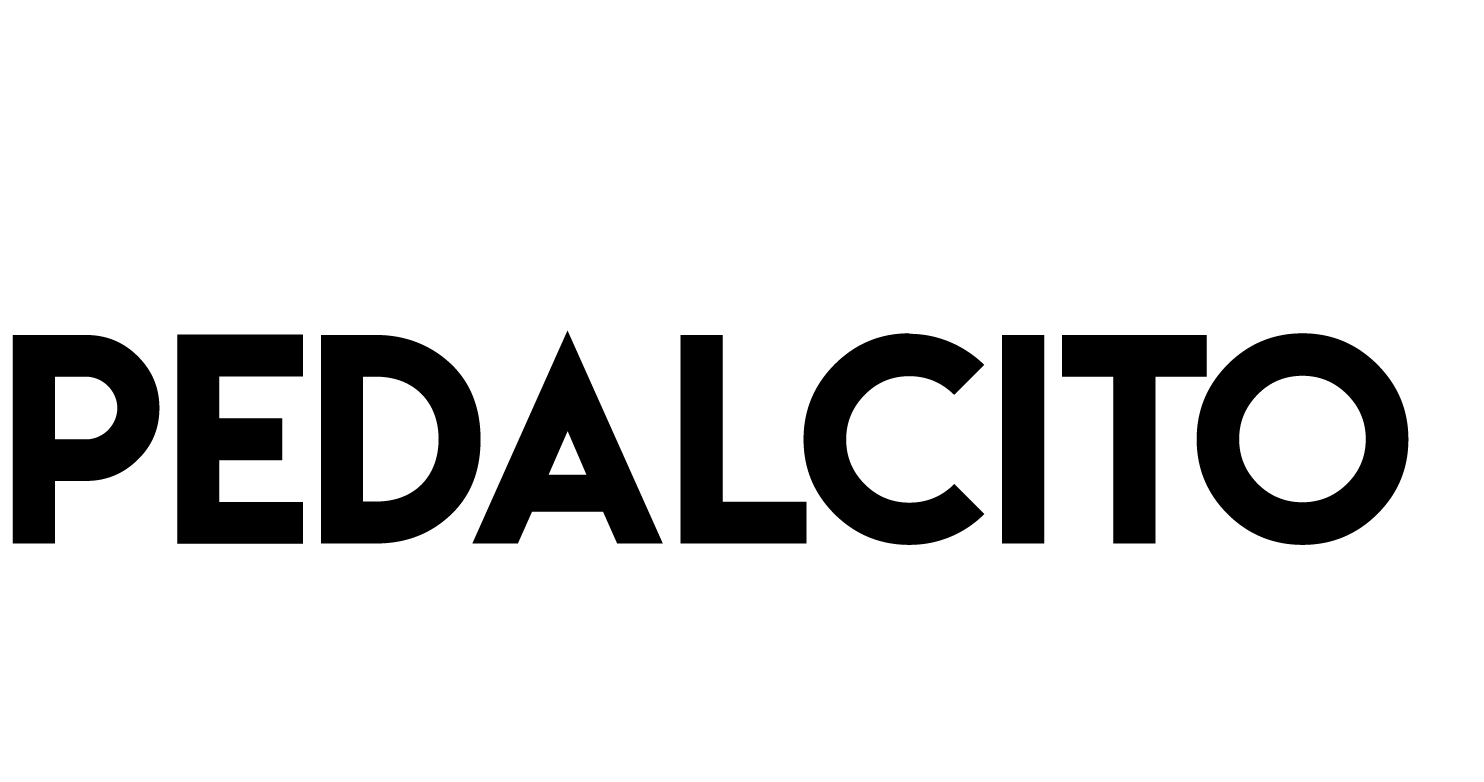
<style>
.page{position:relative;width:1484px;height:782px;background:#ffffff}
.page>*{position:absolute;margin:0}
.t1{font:264.6px "LemonMilk";color:#000000;text-transform:uppercase}
.t2{font:264.6px "LemonMilk";color:#000000}
</style>
<div class="page">
<p class="t1" style="left:12px;top:330px;width:1397px;height:215px">P<span class="t2">E</span>DALCITO</p>
</div>
